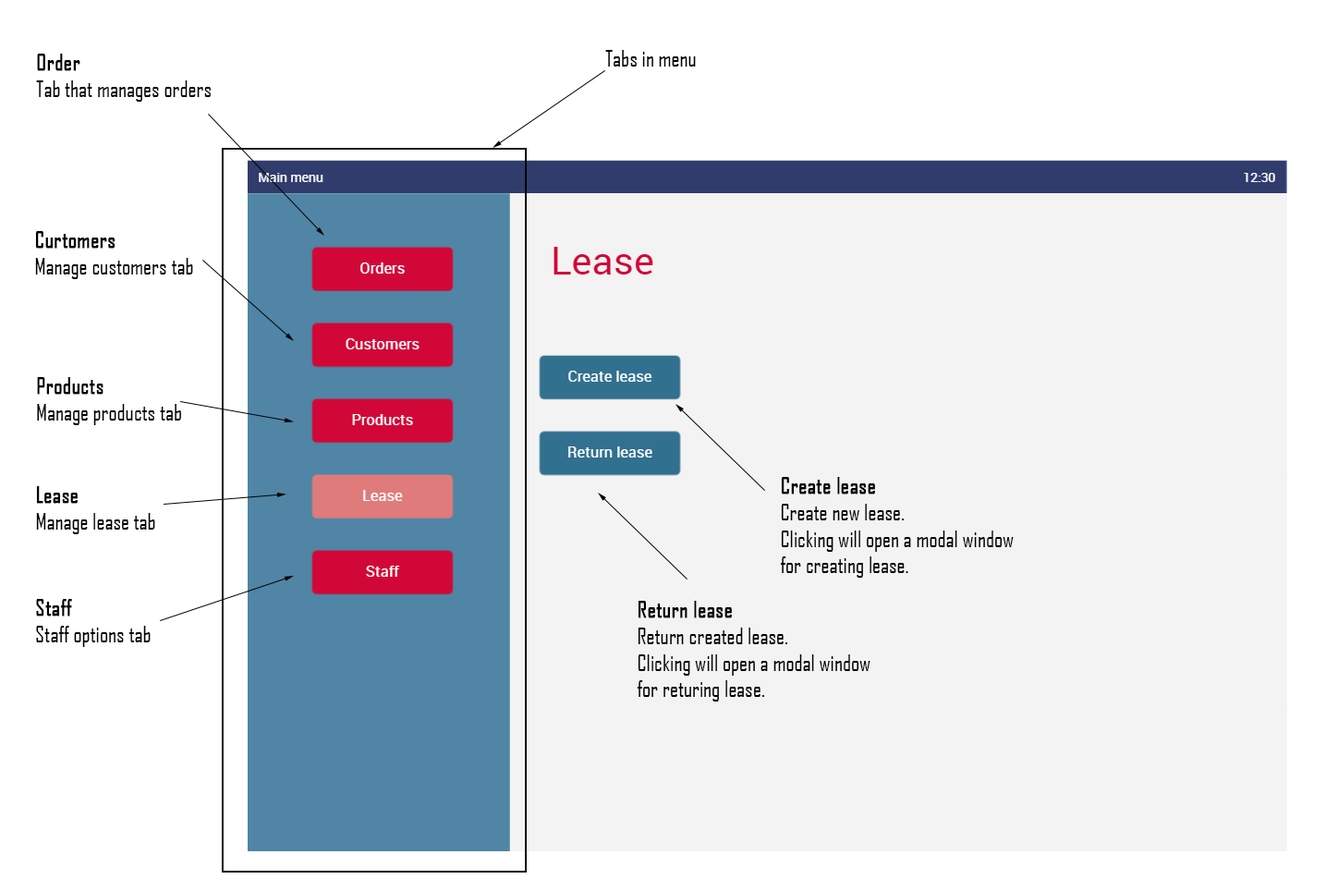
<style>
.page{position:relative;width:1338px;height:891px;background:#f3f3f3}
.page>*{position:absolute;margin:0}
.t1{font:22.2px "AgencyFB-Reg";color:#000000}
.t2{font:22.2px "AgencyFB-Reg";color:#000000;font-weight:bold}
</style>
<div class="page">
<p class="t1" style="left:36px;top:54px;width:175px;height:48px"><span class="t2">Order<br></span>Tab that manages orders</p>
<p class="t1" style="left:605px;top:50px;width:91px;height:17px">Tabs in menu</p>
<p class="t1" style="left:35px;top:231px;width:158px;height:48px"><span class="t2">Curtomers<br></span>Manage customers tab</p>
<p class="t1" style="left:37px;top:377px;width:144px;height:48px"><span class="t2">Products<br></span>Manage products tab</p>
<p class="t1" style="left:780px;top:477px;width:234px;height:101px"><span class="t2">Create lease<br></span>Create new lease.<br>Clicking will open a modal window<br>for creating lease.</p>
<p class="t1" style="left:36px;top:486px;width:119px;height:48px"><span class="t2">Lease<br></span>Manage lease tab</p>
<p class="t1" style="left:36px;top:599px;width:115px;height:48px"><span class="t2">Staff<br></span>Staff options tab</p>
<p class="t1" style="left:637px;top:601px;width:234px;height:101px"><span class="t2">Return lease<br></span>Return created lease.<br>Clicking will open a modal window<br>for returing lease.</p>
</div>
